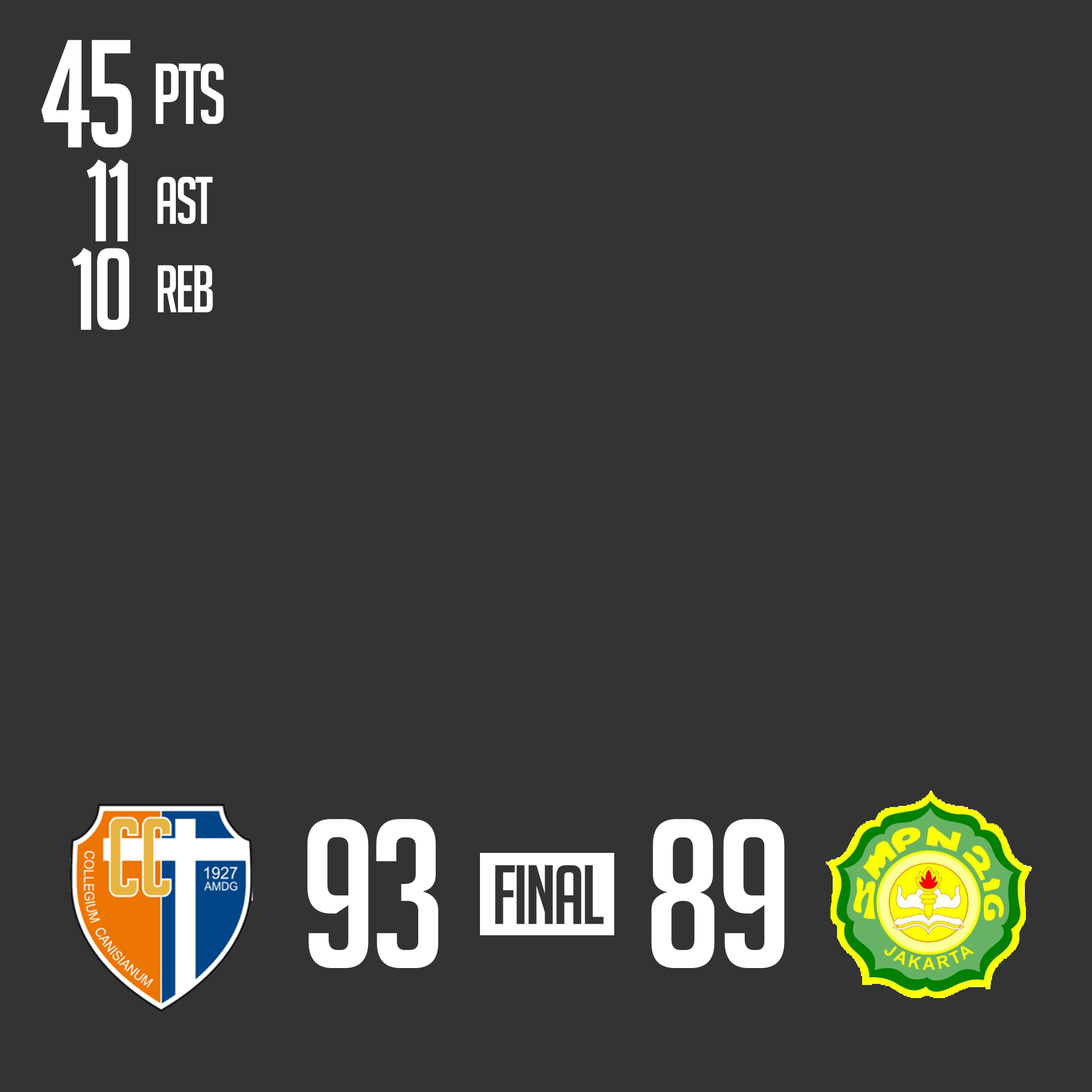
<style>
.page{position:relative;width:1092px;height:1092px;background:#333333}
.page>*{position:absolute;margin:0}
.t1{font:149.3px "BigNoodleTitling";letter-spacing:-0.04em;color:#ffffff;scale:0.95 1}
.t2{font:83.8px "BigNoodleTitling";letter-spacing:-0.04em;color:#ffffff;scale:0.93 1}
.t3{font:113.7px "BigNoodleTitling";letter-spacing:-0.04em;color:#ffffff;scale:0.95 1}
.t4{font:65.3px "BigNoodleTitling";letter-spacing:-0.04em;color:#ffffff;scale:0.93 1}
.t5{font:207.5px "BigNoodleTitling";letter-spacing:-0.04em;color:#ffffff}
</style>
<div class="page">
<p class="t1" style="left:41px;top:40px;width:91px;height:107px">45</p>
<p class="t2" style="left:156px;top:63px;width:68px;height:61px">pts</p>
<p class="t3" style="left:86px;top:159px;width:42px;height:82px">11</p>
<p class="t4" style="left:157px;top:176px;width:56px;height:48px">ast</p>
<p class="t3" style="left:72px;top:248px;width:57px;height:82px">10</p>
<p class="t4" style="left:158px;top:265px;width:55px;height:47px">reb</p>
<p class="t5" style="left:307px;top:819px;width:131px;height:149px">93</p>
<p class="t5" style="left:651px;top:819px;width:134px;height:149px">89</p>
</div>
